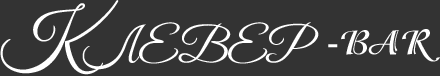
<style>
.page{position:relative;width:440px;height:76px;background:#333333}
.page>*{position:absolute;margin:0}
.t1{font:48px "GoodVibesPro";color:#ffffff}
.t2{font:72px "GoodVibesPro";color:#ffffff}
.t3{font:36px "1IsadoraMBold";color:#ffffff}
.t4{font:36px "TimesNewRomanPSMT";color:#ffffff}
</style>
<div class="page">
<p class="t1" style="left:0px;top:0px;width:319px;height:75px"><span class="t2"> К</span>ЛЕВЕР</p>
<p class="t3" style="left:328px;top:29px;width:112px;height:33px"><span class="t4">-</span>BAR</p>
</div>
